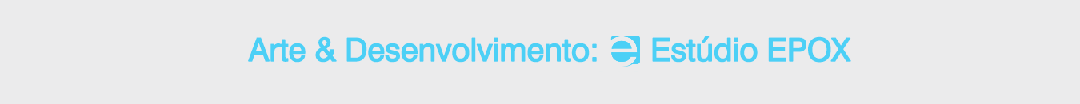
<style>
.page{position:relative;width:1080px;height:104px;background:#ebebec}
.page>*{position:absolute;margin:0}
.t1{font:31.9px "Swiss721BT-Roman";letter-spacing:-0.03em;color:#4cd0f6;font-weight:bold}
</style>
<div class="page">
<p class="t1" style="left:248px;top:36px;width:349px;height:27px">Arte &amp; Desenvolvimento:</p>
<p class="t1" style="left:652px;top:36px;width:199px;height:27px">Estúdio EPOX</p>
</div>
